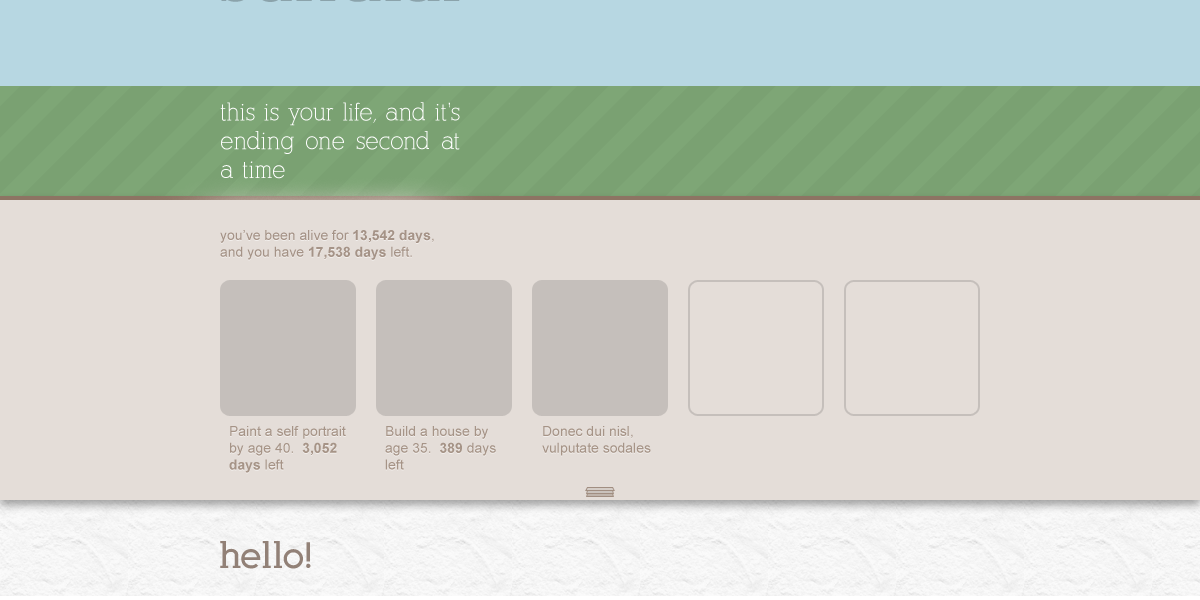
<style>
.page{position:relative;width:1200px;height:600px;background:#e4ddd8}
.page>*{position:absolute;margin:0}
.t1{font:14px "ArialMT";color:#a59387}
.t2{font:14px "Arial-BoldMT";color:#a59387}
.t3{font:14px "ArialMT";color:#a69487}
.t4{font:14px "Arial-BoldMT";color:#a69487}
</style>
<div class="page">
<p class="t1" style="left:220px;top:230px;width:214px;height:30px">you’ve been alive for <span class="t2">13,542 days</span>,<br>and you have <span class="t2">17,538 days</span> left.</p>
<p class="t3" style="left:229px;top:426px;width:117px;height:47px">Paint a self portrait by age 40.  <span class="t4">3,052 days</span> left</p>
<p class="t3" style="left:385px;top:426px;width:111px;height:44px">Build a house by age 35.  <span class="t4">389</span> days left</p>
<p class="t3" style="left:542px;top:426px;width:109px;height:30px">Donec dui nisl, vulputate sodales</p>
</div>
